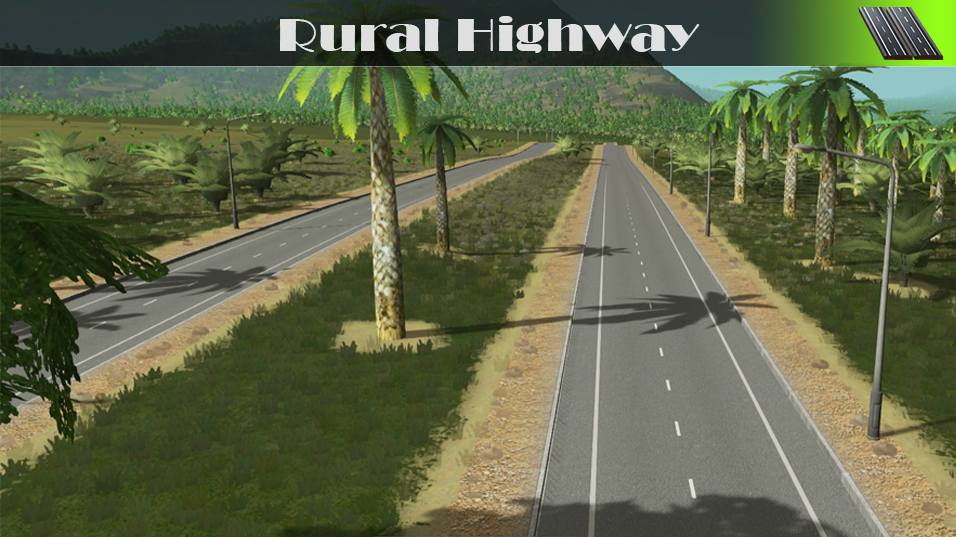
<style>
.page{position:relative;width:956px;height:537px}
.page>*{position:absolute;margin:0}
.t1{font:48px "Broadway";color:#dfe0df;scale:1.11 1}
</style>
<div class="page">
<p class="t1" style="left:280px;top:16px;width:420px;height:37px">Rural Highway</p>
</div>
